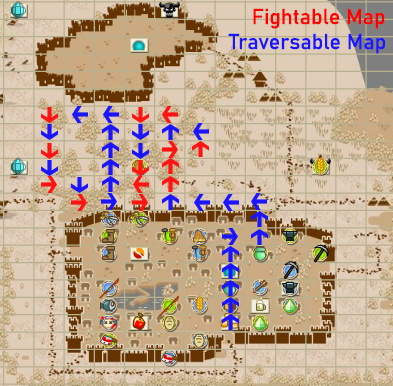
<style>
.page{position:relative;width:393px;height:386px}
.page>*{position:absolute;margin:0}
.t1{font:21.3px "Bahnschrift";color:#ff0000}
.t2{font:21.3px "Bahnschrift";color:#1a14ff}
</style>
<div class="page">
<p class="t1" style="left:253px;top:8px;width:132px;height:21px">Fightable Map</p>
<p class="t2" style="left:228px;top:33px;width:157px;height:21px">Traversable Map</p>
</div>
